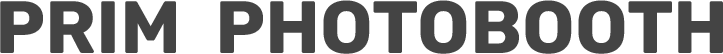
<style>
.page{position:relative;width:723px;height:54px;background:#444444}
.page>*{position:absolute;margin:0}
.t1{font:74px "Rubik-Bold";color:#444444}
</style>
<div class="page">
<p class="t1" style="left:0px;top:1px;width:176px;height:52px">PRIM</p>
<p class="t1" style="left:220px;top:0px;width:503px;height:54px">PHOTOBOOTH</p>
</div>
